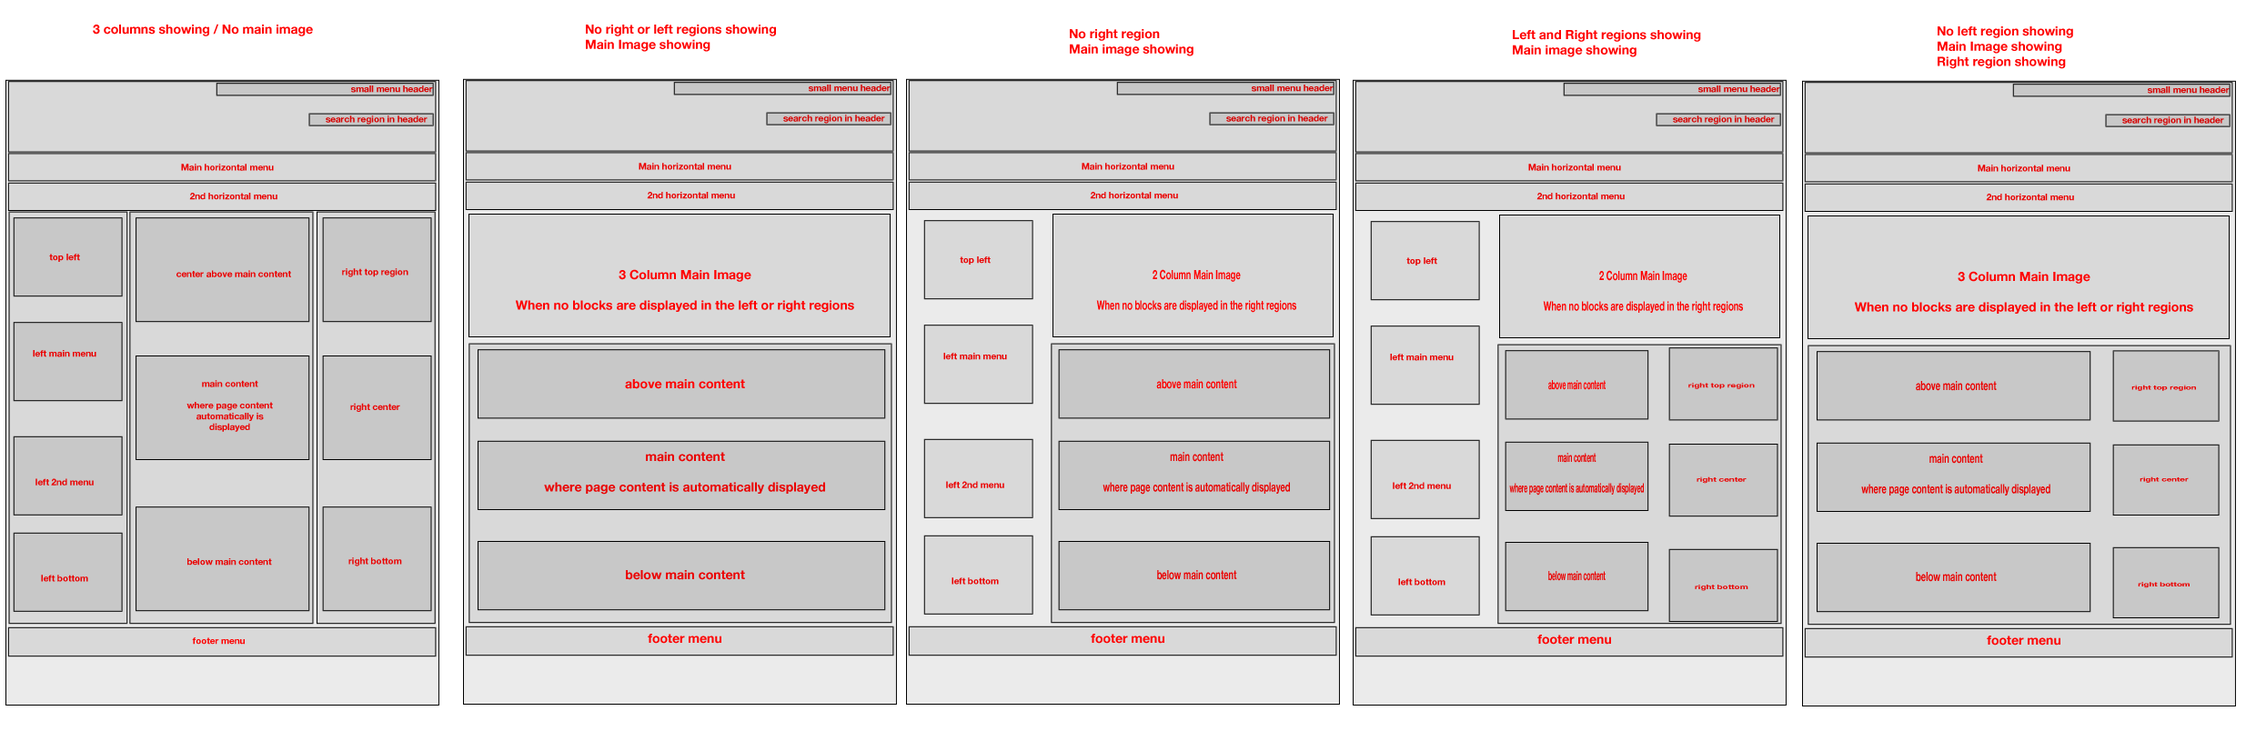
<style>
.page{position:relative;width:2256px;height:731px;background:#d9d9d9}
.page>*{position:absolute;margin:0}
.t1{font:12.7px "HelveticaNeue-Bold";color:#ff0000}
.t2{font:9px "HelveticaNeue-Bold";color:#d90000}
.t3{font:9px "HelveticaNeue-Bold";color:#ff0000}
.t4{font:12.7px "HelveticaNeue-Bold";color:#ff0000;scale:0.67 1}
.t5{font:12.7px "HelveticaNeue-Bold";color:#ff0000;scale:0.48 1}
.t6{font:6.3px "HelveticaNeue-Bold";color:#ff0000;scale:1.43 1}
.t7{font:6.1px "HelveticaNeue-Bold";color:#ff0000;scale:1.43 1}
</style>
<div class="page">
<p class="t1" style="left:93px;top:24px;width:220px;height:12px">3 columns showing / No main image</p>
<p class="t1" style="left:586px;top:25px;width:190px;height:27px">No right or left regions showing<br>Main Image showing</p>
<p class="t1" style="left:1070px;top:29px;width:124px;height:27px">No right region<br>Main image showing</p>
<p class="t1" style="left:1938px;top:26px;width:135px;height:43px">No left region showing<br>Main Image showing<br>Right region showing</p>
<p class="t1" style="left:1513px;top:30px;width:188px;height:27px">Left and Right regions showing<br>Main image showing</p>
<p class="t2" style="left:351px;top:86px;width:82px;height:7px">small menu header</p>
<p class="t2" style="left:809px;top:85px;width:82px;height:7px">small menu header</p>
<p class="t2" style="left:1252px;top:85px;width:82px;height:7px">small menu header</p>
<p class="t2" style="left:1699px;top:86px;width:81px;height:7px">small menu header</p>
<p class="t2" style="left:2148px;top:86px;width:82px;height:8px">small menu header</p>
<p class="t2" style="left:326px;top:116px;width:102px;height:9px">search region in header</p>
<p class="t2" style="left:783px;top:115px;width:102px;height:9px">search region in header</p>
<p class="t2" style="left:1226px;top:115px;width:102px;height:9px">search region in header</p>
<p class="t2" style="left:1673px;top:116px;width:102px;height:9px">search region in header</p>
<p class="t2" style="left:2122px;top:116px;width:102px;height:10px">search region in header</p>
<p class="t3" style="left:181px;top:164px;width:93px;height:7px">Main horizontal menu</p>
<p class="t3" style="left:639px;top:163px;width:92px;height:7px">Main horizontal menu</p>
<p class="t3" style="left:1082px;top:163px;width:92px;height:7px">Main horizontal menu</p>
<p class="t3" style="left:1528px;top:164px;width:93px;height:7px">Main horizontal menu</p>
<p class="t3" style="left:1978px;top:165px;width:93px;height:7px">Main horizontal menu</p>
<p class="t3" style="left:189px;top:193px;width:88px;height:7px">2nd horizontal menu</p>
<p class="t3" style="left:647px;top:192px;width:88px;height:7px">2nd horizontal menu</p>
<p class="t3" style="left:1090px;top:192px;width:88px;height:7px">2nd horizontal menu</p>
<p class="t3" style="left:1537px;top:193px;width:88px;height:7px">2nd horizontal menu</p>
<p class="t3" style="left:1986px;top:194px;width:88px;height:7px">2nd horizontal menu</p>
<p class="t3" style="left:49px;top:254px;width:31px;height:8px">top left</p>
<p class="t3" style="left:960px;top:257px;width:31px;height:8px">top left</p>
<p class="t3" style="left:1406px;top:257px;width:31px;height:9px">top left</p>
<p class="t3" style="left:342px;top:268px;width:66px;height:9px">right top region</p>
<p class="t1" style="left:515px;top:269px;width:339px;height:44px;text-align:center">3 Column Main Image<br><br>When no blocks are displayed in the left or right regions</p>
<p class="t4" style="left:1096px;top:269px;width:200px;height:44px;text-align:center">2 Column Main Image<br><br>When no blocks are displayed in the right regions</p>
<p class="t3" style="left:176px;top:270px;width:115px;height:7px">center above main content</p>
<p class="t4" style="left:1543px;top:270px;width:200px;height:44px;text-align:center">2 Column Main Image<br><br>When no blocks are displayed in the right regions</p>
<p class="t1" style="left:1854px;top:271px;width:339px;height:44px;text-align:center">3 Column Main Image<br><br>When no blocks are displayed in the left or right regions</p>
<p class="t3" style="left:33px;top:350px;width:63px;height:8px">left main menu</p>
<p class="t3" style="left:943px;top:353px;width:64px;height:7px">left main menu</p>
<p class="t3" style="left:1390px;top:354px;width:64px;height:7px">left main menu</p>
<p class="t3" style="left:186px;top:380px;width:87px;height:52px;text-align:center">main content<br><br>where page content<br>automatically is<br>displayed</p>
<p class="t1" style="left:625px;top:379px;width:120px;height:10px">above main content</p>
<p class="t4" style="left:1156px;top:379px;width:81px;height:10px">above main content</p>
<p class="t5" style="left:1548px;top:380px;width:58px;height:10px">above main content</p>
<p class="t6" style="left:1689px;top:383px;width:66px;height:6px">right top region</p>
<p class="t4" style="left:1916px;top:381px;width:81px;height:10px">above main content</p>
<p class="t7" style="left:2132px;top:385px;width:64px;height:6px">right top region</p>
<p class="t3" style="left:350px;top:403px;width:50px;height:9px">right center</p>
<p class="t1" style="left:544px;top:452px;width:281px;height:43px;text-align:center">main content<br><br>where page content is automatically displayed</p>
<p class="t4" style="left:1103px;top:452px;width:187px;height:43px;text-align:center">main content<br><br>where page content is automatically displayed</p>
<p class="t5" style="left:1509px;top:453px;width:135px;height:43px;text-align:center">main content<br><br>where page content is automatically displayed</p>
<p class="t4" style="left:1861px;top:454px;width:190px;height:43px;text-align:center">main content<br><br>where page content is automatically displayed</p>
<p class="t3" style="left:35px;top:479px;width:59px;height:7px">left 2nd menu</p>
<p class="t3" style="left:946px;top:481px;width:58px;height:8px">left 2nd menu</p>
<p class="t3" style="left:1393px;top:482px;width:58px;height:7px">left 2nd menu</p>
<p class="t6" style="left:1697px;top:477px;width:50px;height:7px">right center</p>
<p class="t7" style="left:2140px;top:477px;width:49px;height:6px">right center</p>
<p class="t3" style="left:348px;top:558px;width:54px;height:9px">right bottom</p>
<p class="t3" style="left:187px;top:559px;width:85px;height:7px">below main content</p>
<p class="t3" style="left:41px;top:575px;width:47px;height:7px">left bottom</p>
<p class="t1" style="left:626px;top:570px;width:119px;height:10px">below main content</p>
<p class="t3" style="left:952px;top:578px;width:47px;height:7px">left bottom</p>
<p class="t4" style="left:1157px;top:570px;width:80px;height:10px">below main content</p>
<p class="t3" style="left:1398px;top:579px;width:48px;height:7px">left bottom</p>
<p class="t5" style="left:1548px;top:571px;width:58px;height:10px">below main content</p>
<p class="t4" style="left:1916px;top:572px;width:81px;height:10px">below main content</p>
<p class="t6" style="left:1695px;top:585px;width:54px;height:6px">right bottom</p>
<p class="t7" style="left:2138px;top:582px;width:52px;height:7px">right bottom</p>
<p class="t3" style="left:192px;top:638px;width:53px;height:7px">footer menu</p>
<p class="t1" style="left:648px;top:634px;width:73px;height:10px">footer menu</p>
<p class="t1" style="left:1091px;top:634px;width:73px;height:10px">footer menu</p>
<p class="t1" style="left:1537px;top:635px;width:74px;height:10px">footer menu</p>
<p class="t1" style="left:1987px;top:636px;width:74px;height:10px">footer menu</p>
</div>
